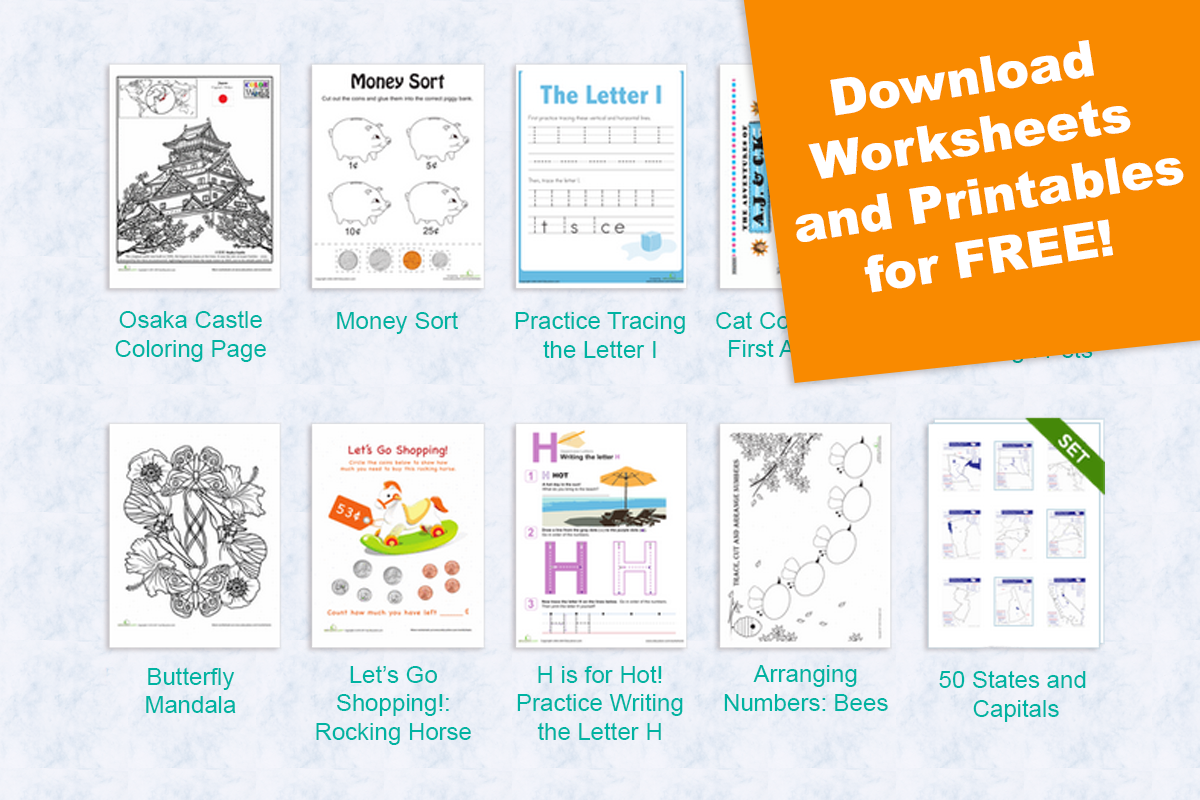
<style>
.page{position:relative;width:1200px;height:800px}
.page>*{position:absolute;margin:0}
.t1{font:50px "Arial-Black";color:#ffffff}
.t2{font:24px "ArialMT";color:#00b3a2}
.t3{font:24px "ArialMT"}
</style>
<div class="page">
<p class="t1" style="left:795px;top:40px;width:389px;height:253px;text-align:center;rotate:-9deg">Download <br>Worksheets <br>and Printables<br>for FREE!</p>
<p class="t2" style="left:115px;top:310px;width:151px;height:52px;text-align:center">Osaka Castle<br>Coloring Page</p>
<p class="t2" style="left:337px;top:311px;width:121px;height:23px">Money Sort</p>
<p class="t2" style="left:515px;top:311px;width:170px;height:47px;text-align:center">Practice Tracing<br>the Letter I</p>
<p class="t3" style="left:716px;top:311px;width:177px;height:46px;text-align:center">Cat Comics: The <br>First Adventure</p>
<p class="t2" style="left:316px;top:665px;width:155px;height:80px;text-align:center">Let’s Go<br>Shopping!:<br>Rocking Horse</p>
<p class="t2" style="left:517px;top:665px;width:166px;height:75px;text-align:center">H is for Hot!<br>Practice Writing<br>the Letter H</p>
<p class="t2" style="left:724px;top:665px;width:164px;height:46px;text-align:center">Arranging<br>Numbers: Bees</p>
<p class="t2" style="left:146px;top:667px;width:90px;height:46px;text-align:center">Butterfly<br>Mandala</p>
<p class="t2" style="left:939px;top:670px;width:147px;height:52px;text-align:center">50 States and <br>Capitals</p>
</div>
